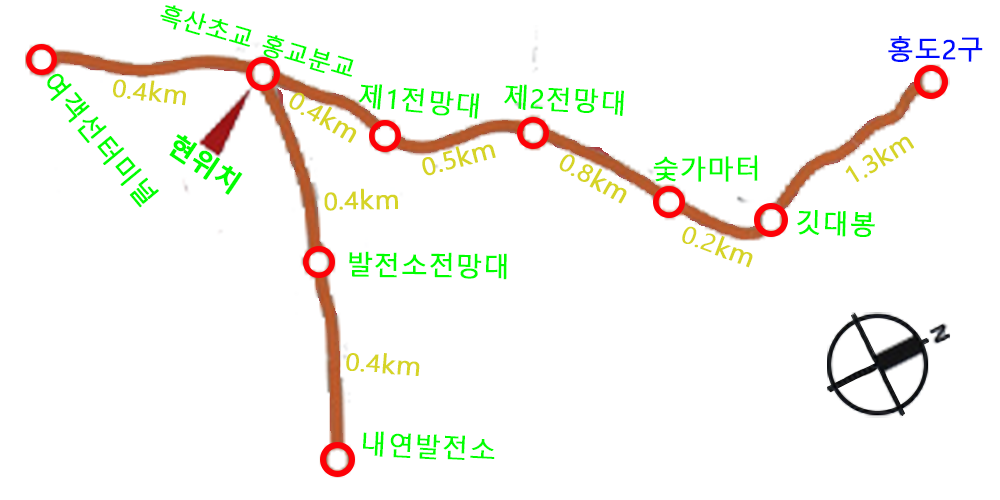
<style>
.page{position:relative;width:1000px;height:500px;background:#ffffff}
.page>*{position:absolute;margin:0}
.t1{font:24px "MalgunGothic";color:#00fe00;font-weight:bold}
.t2{font:26.6px "MalgunGothic";color:#000cfe;font-weight:bold}
.t3{font:26.6px "MalgunGothic";color:#00fe00;font-weight:bold}
.t4{font:24px "MalgunGothic";color:#d6d426;font-weight:bold;scale:1.06 1}
.t5{font:26.6px "MalgunGothic";color:#d6d426;font-weight:bold;scale:1.06 1}
.t6{font:26.6px "MalgunGothicBold";color:#00fe00;font-weight:bold}
</style>
<div class="page">
<p class="t1" style="left:160px;top:5px;width:194px;height:72px;rotate:16deg">흑산초교 홍교분교</p>
<p class="t2" style="left:888px;top:36px;width:95px;height:26px">홍도2구</p>
<p class="t3" style="left:47px;top:73px;width:112px;height:135px;rotate:50deg">여객선터미널</p>
<p class="t4" style="left:113px;top:79px;width:73px;height:27px;rotate:8deg">0.4<span class="t5">km</span></p>
<p class="t3" style="left:358px;top:84px;width:122px;height:35px;rotate:5deg">제1전망대</p>
<p class="t3" style="left:504px;top:84px;width:120px;height:32px;rotate:3deg">제2전망대</p>
<p class="t4" style="left:289px;top:92px;width:68px;height:51px;rotate:30deg">0.4<span class="t5">km</span></p>
<p class="t6" style="left:169px;top:134px;width:74px;height:61px;rotate:34deg">현위치</p>
<p class="t4" style="left:845px;top:136px;width:69px;height:46px;rotate:-32deg">1.3<span class="t5">km</span></p>
<p class="t4" style="left:422px;top:144px;width:74px;height:32px;rotate:-15deg">0.5<span class="t5">km</span></p>
<p class="t4" style="left:559px;top:154px;width:68px;height:50px;rotate:29deg">0.8<span class="t5">km</span></p>
<p class="t3" style="left:653px;top:155px;width:105px;height:27px">숯가마터</p>
<p class="t4" style="left:324px;top:188px;width:74px;height:23px;rotate:-1deg">0.4<span class="t5">km</span></p>
<p class="t3" style="left:797px;top:210px;width:78px;height:27px;rotate:2deg">깃대봉</p>
<p class="t4" style="left:682px;top:226px;width:71px;height:42px;rotate:21deg">0.2<span class="t5">km</span></p>
<p class="t3" style="left:349px;top:251px;width:158px;height:29px;rotate:1deg">발전소전망대</p>
<p class="t4" style="left:346px;top:353px;width:74px;height:23px;rotate:5deg">0.4<span class="t5">km</span></p>
<p class="t3" style="left:363px;top:431px;width:132px;height:29px;rotate:3deg">내연발전소</p>
</div>
